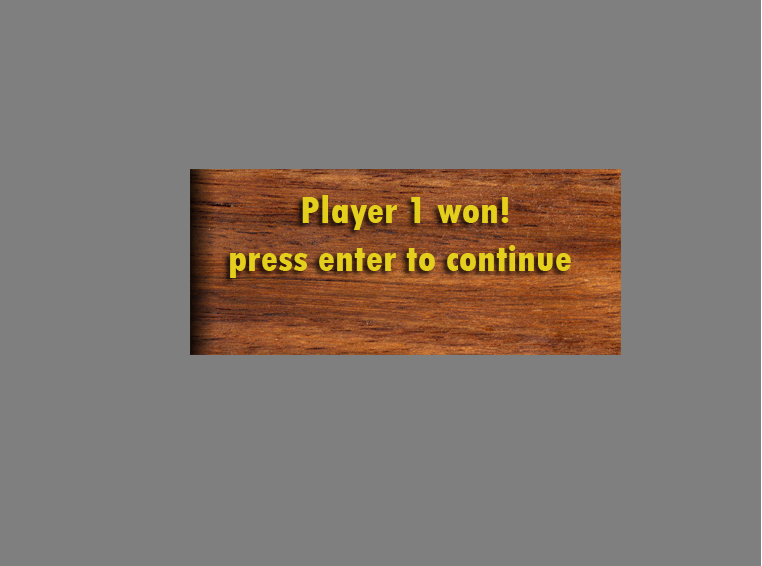
<style>
.page{position:relative;width:762px;height:566px;background:#7f7f7f}
.page>*{position:absolute;margin:0}
.t1{font:40px "TwCenMT-CondensedExtraBold";color:#e5cf1d}
</style>
<div class="page">
<p class="t1" style="left:230px;top:195px;width:341px;height:83px">Player 1 won!<br>press enter to continue</p>
</div>
